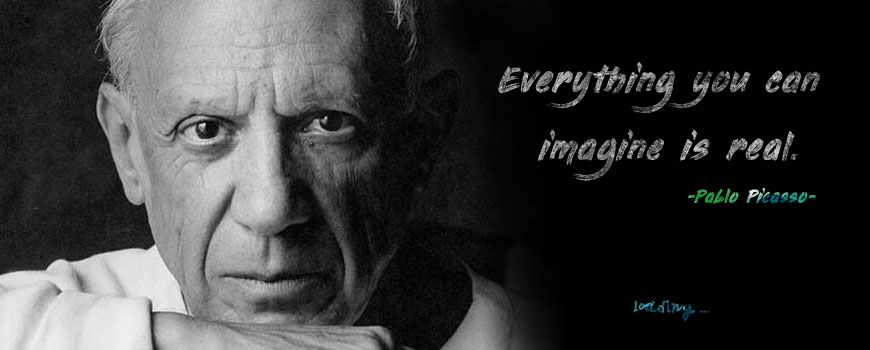
<style>
.page{position:relative;width:870px;height:350px;background:#010101}
.page>*{position:absolute;margin:0}
.t1{font:37.5px "PaintingWithChocolate"}
.t2{font:18.8px "PaintingWithChocolate"}
.t3{font:18.8px "LeviBrush"}
</style>
<div class="page">
<p class="t1" style="left:498px;top:62px;width:322px;height:52px">Everything you can</p>
<p class="t1" style="left:538px;top:129px;width:260px;height:52px">imagine is real.</p>
<p class="t2" style="left:688px;top:187px;width:128px;height:17px">-Pablo Picasso-</p>
<p class="t3" style="left:633px;top:300px;width:77px;height:22px">loading ...</p>
</div>
